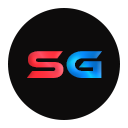
<style>
.page{position:relative;width:128px;height:128px;background:#0d0c0c}
.page>*{position:absolute;margin:0}
.t1{font:40px "EthnocentricRg-Regular"}
</style>
<div class="page">
<p class="t1" style="left:27px;top:51px;width:75px;height:27px">SG</p>
</div>
